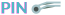
<style>
.page{position:relative;width:65px;height:15px;background:#ffffff}
.page>*{position:absolute;margin:0}
.t1{font:16.2px "Lato-Bold";color:#50b9c4;font-weight:bold}
</style>
<div class="page">
<p class="t1" style="left:1px;top:2px;width:26px;height:12px">PIN</p>
</div>
